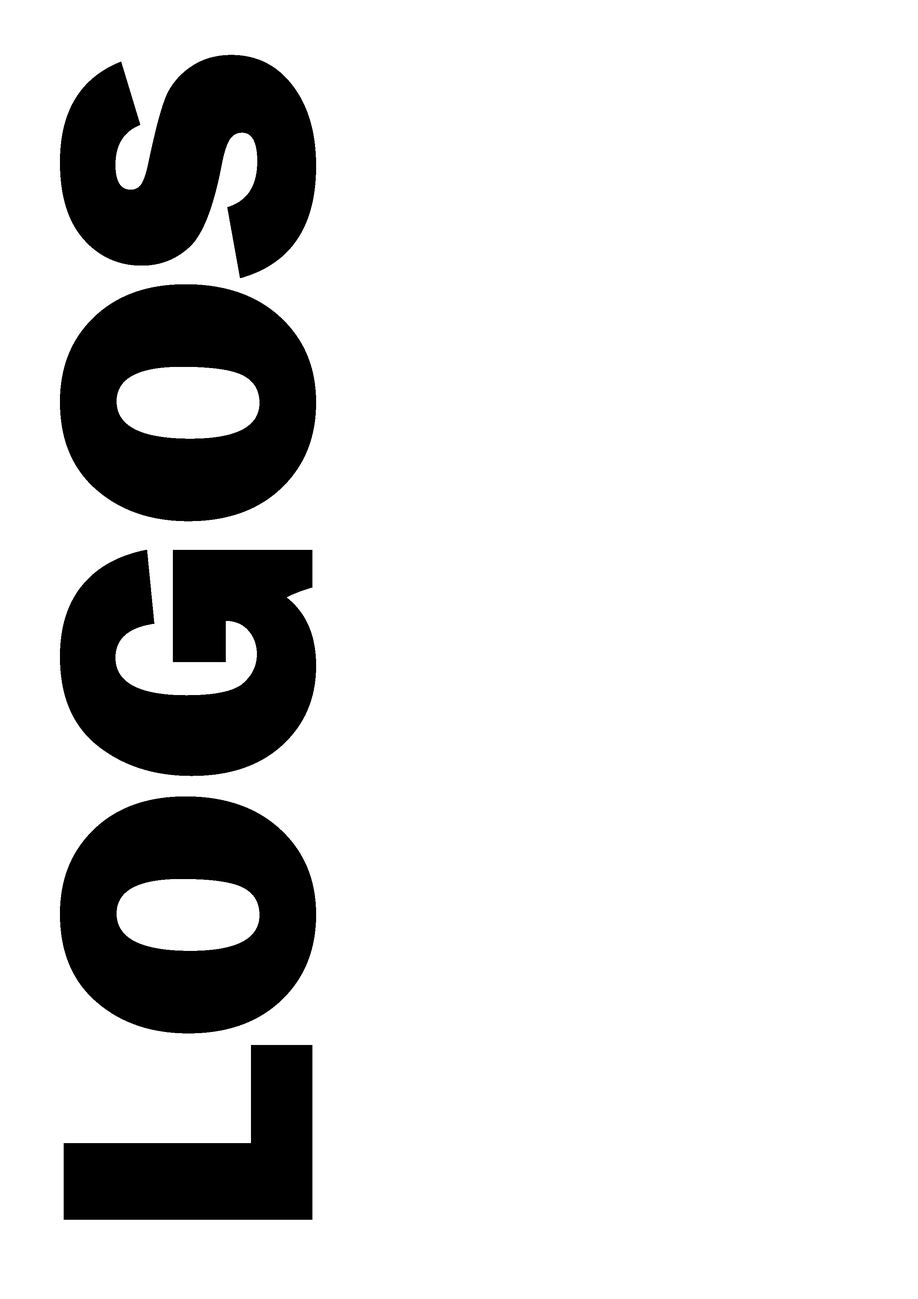
<style>
.page{position:relative;width:918px;height:1299px;background:#ffffff}
.page>*{position:absolute;margin:0}
.t1{font:372.4px "FranklinGothic-Heavy";color:#000000}
</style>
<div class="page">
<p class="t1" style="left:60px;top:55px;width:256px;height:1165px;rotate:-90deg">LOGOS</p>
</div>
